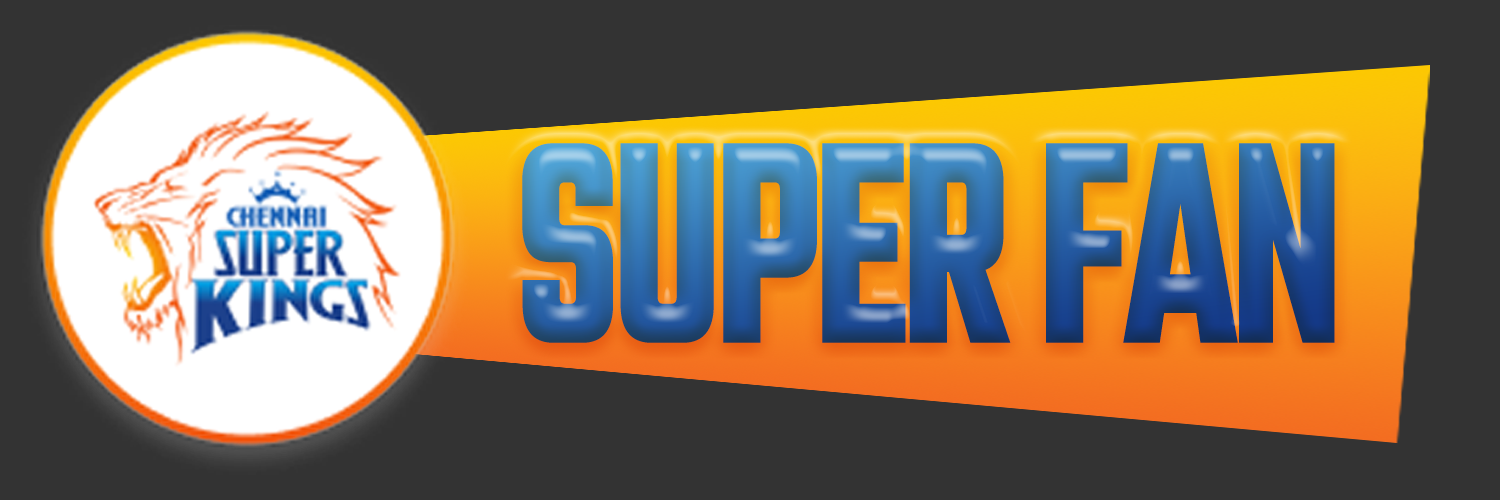
<style>
.page{position:relative;width:1500px;height:500px;background:#333333}
.page>*{position:absolute;margin:0}
.t1{font:310.2px "Teko-Bold";letter-spacing:-0.06em;font-weight:bold;scale:0.68 1}
</style>
<div class="page">
<p class="t1" style="left:522px;top:143px;width:813px;height:200px">SUPER FAN</p>
</div>
